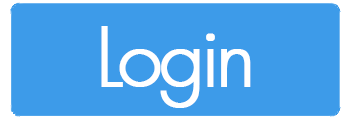
<style>
.page{position:relative;width:350px;height:120px;background:#3d9be9}
.page>*{position:absolute;margin:0}
.t1{font:80px "FuturaLight";letter-spacing:-0.07em;color:#ffffff;font-weight:bold}
</style>
<div class="page">
<p class="t1" style="left:101px;top:26px;width:150px;height:82px">Login</p>
</div>
